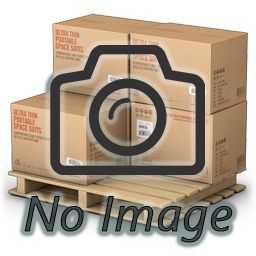
<style>
.page{position:relative;width:256px;height:256px;background:#ffffff}
.page>*{position:absolute;margin:0}
.t1{font:48.6px "SegoeUI-Italic";font-weight:bold}
</style>
<div class="page">
<p class="t1" style="left:24px;top:196px;width:209px;height:47px">No Image</p>
</div>
